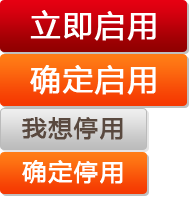
<style>
.page{position:relative;width:189px;height:200px}
.page>*{position:absolute;margin:0}
.t1{font:30px "MicrosoftYaHei";letter-spacing:0.05em;color:#ffffff;font-weight:bold}
.t2{font:24px "MicrosoftYaHei";letter-spacing:0.05em;color:#59493f;font-weight:bold}
.t3{font:24px "MicrosoftYaHei";letter-spacing:0.05em;color:#ffffff;font-weight:bold}
</style>
<div class="page">
<p class="t1" style="left:30px;top:10px;width:126px;height:31px">立即启用</p>
<p class="t1" style="left:30px;top:65px;width:126px;height:30px">确定启用</p>
<p class="t2" style="left:22px;top:117px;width:101px;height:23px">我想停用</p>
<p class="t3" style="left:22px;top:160px;width:101px;height:24px">确定停用</p>
</div>
